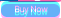
<style>
.page{position:relative;width:61px;height:18px;background:#65b1f8}
.page>*{position:absolute;margin:0}
.t1{font:8.3px "OpenSans-Light"}
</style>
<div class="page">
<p class="t1" style="left:15px;top:5px;width:33px;height:10px">Buy Now</p>
</div>
